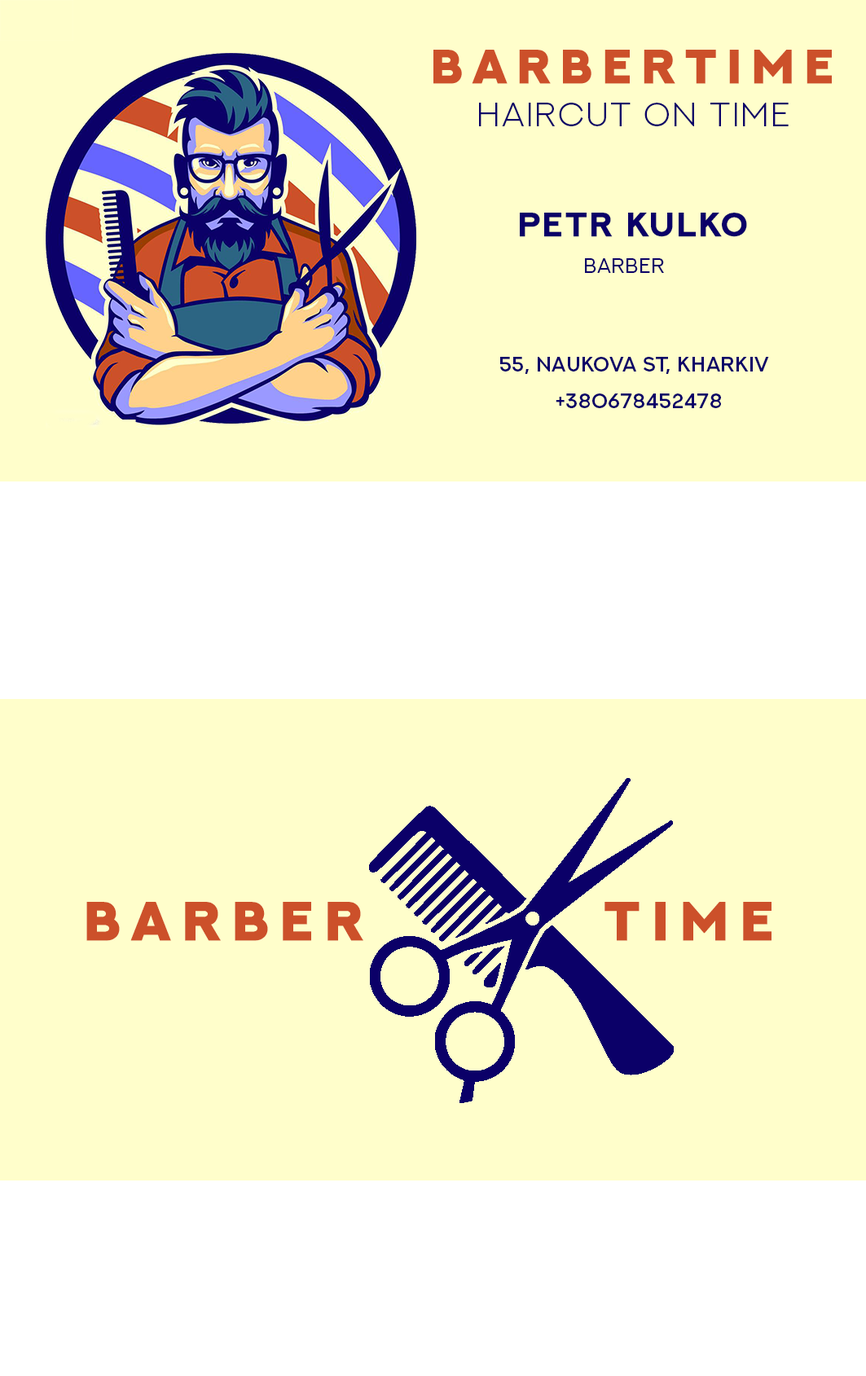
<style>
.page{position:relative;width:866px;height:1376px;background:#fffecb}
.page>*{position:absolute;margin:0}
.t1{font:47.5px "NEXTART-Heavy";letter-spacing:0.2em;color:#cc502a;font-weight:bold}
.t2{font:34px "NEXTART-Light";letter-spacing:0.05em;color:#0b0068}
.t3{font:34px "NEXTART-Bold";letter-spacing:0.05em;color:#0b0068;font-weight:bold}
.t4{font:20.4px "NEXTART";letter-spacing:0.025em;color:#0b0068}
.t5{font:20.4px "NEXTART-SemiBold";letter-spacing:0.025em;color:#0b0068}
.t6{font:54.3px "NEXTART-Heavy";letter-spacing:0.2em;color:#cc502a;font-weight:bold}
</style>
<div class="page">
<p class="t1" style="left:434px;top:50px;width:398px;height:34px">BARBERTIME</p>
<p class="t2" style="left:479px;top:103px;width:310px;height:23px">haircut on time</p>
<p class="t3" style="left:520px;top:213px;width:227px;height:24px">PETR KULKO</p>
<p class="t4" style="left:585px;top:258px;width:79px;height:15px">BARBER</p>
<p class="t5" style="left:500px;top:357px;width:269px;height:17px">55, NAUKOVA ST, KHARKIV</p>
<p class="t5" style="left:556px;top:394px;width:165px;height:14px">+380678452478</p>
<p class="t6" style="left:86px;top:902px;width:277px;height:39px">BARBER</p>
<p class="t6" style="left:605px;top:902px;width:167px;height:39px">TIME</p>
</div>
